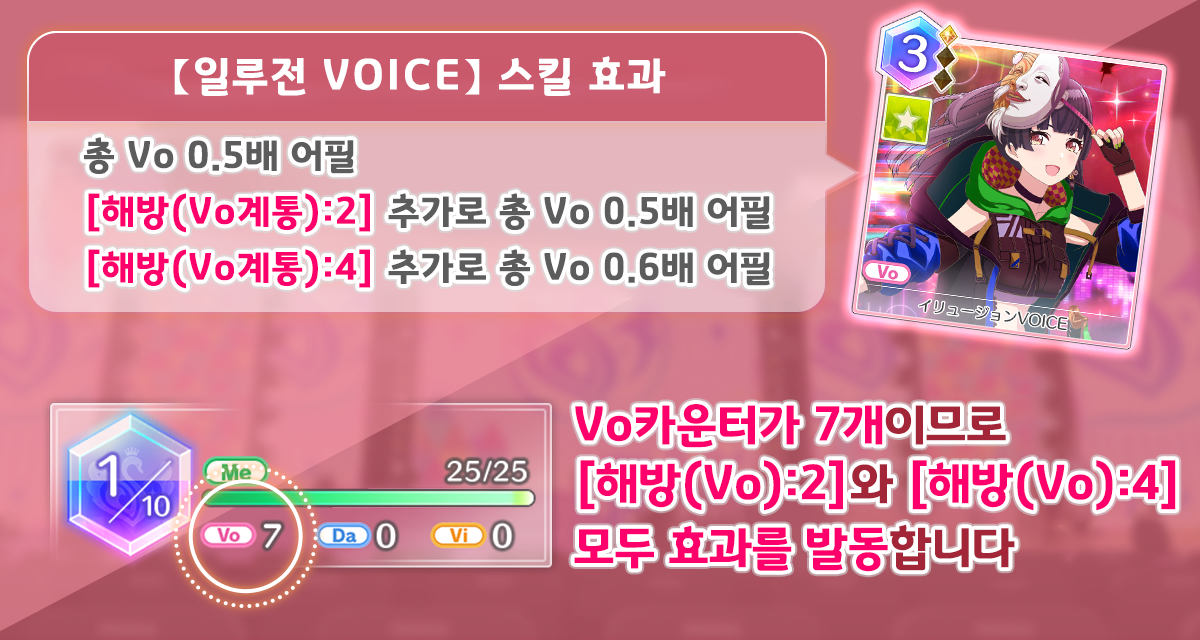
<style>
.page{position:relative;width:1200px;height:640px}
.page>*{position:absolute;margin:0}
.t1{font:42.7px "GyeonggiTitleB";letter-spacing:0.05em;color:#ffffff}
.t2{font:37.3px/56px "GyeonggiTitleB";letter-spacing:0.03em;color:#5c5c5c}
.t3{font:37.3px/56px "GyeonggiTitleB";letter-spacing:0.03em;color:#fe006c}
.t4{font:48px/64px "GyeonggiTitleB";color:#fe006c}
.t5{font:48px/58.7px "GyeonggiTitleB";color:#fd006c}
.t6{font:48px/58.7px "GyeonggiTitleB";color:#a32538}
.t7{font:48px/64px "GyeonggiTitleB";color:#a32538}
.t8{font:48px/58.7px "GyeonggiTitleB";color:#fe006c}
</style>
<div class="page">
<p class="t1" style="left:174px;top:56px;width:492px;height:40px">【일루전 VOICE】 스킬 효과</p>
<p class="t2" style="left:84px;top:137px;width:686px;height:152px">총 Vo 0.5배 어필<br><span class="t3">[해방(Vo계통):2]</span> 추가로 총 Vo 0.5배 어필<br><span class="t3">[해방(Vo계통):4]</span> 추가로 총 Vo 0.6배 어필</p>
<p class="t4" style="left:574px;top:404px;width:602px;height:168px"><span class="t5">Vo카운터가 7개</span><span class="t6">이므로<br></span>[해방(Vo):2]<span class="t7">와 </span>[해방(Vo):4]<br><span class="t8">모두 효과를 발동</span><span class="t6">합니다</span></p>
</div>
